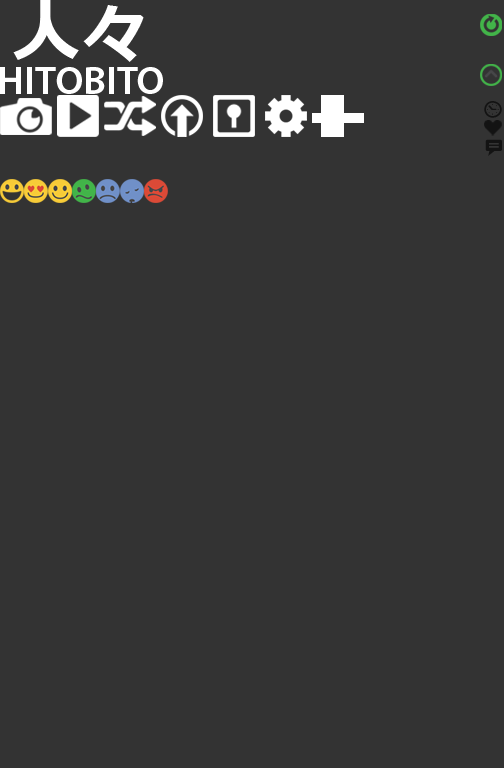
<style>
.page{position:relative;width:504px;height:768px;background:#333333}
.page>*{position:absolute;margin:0}
.t1{font:40px/19px "MyriadPro-Semibold";color:#ffffff}
.t2{font:70px/19px "MeiryoUI-Bold";color:#ffffff}
</style>
<div class="page">
<p class="t1" style="left:0px;top:0px;width:163px;height:94px;text-align:center"><span class="t2">人々<br></span><br>HITOBITO</p>
</div>
